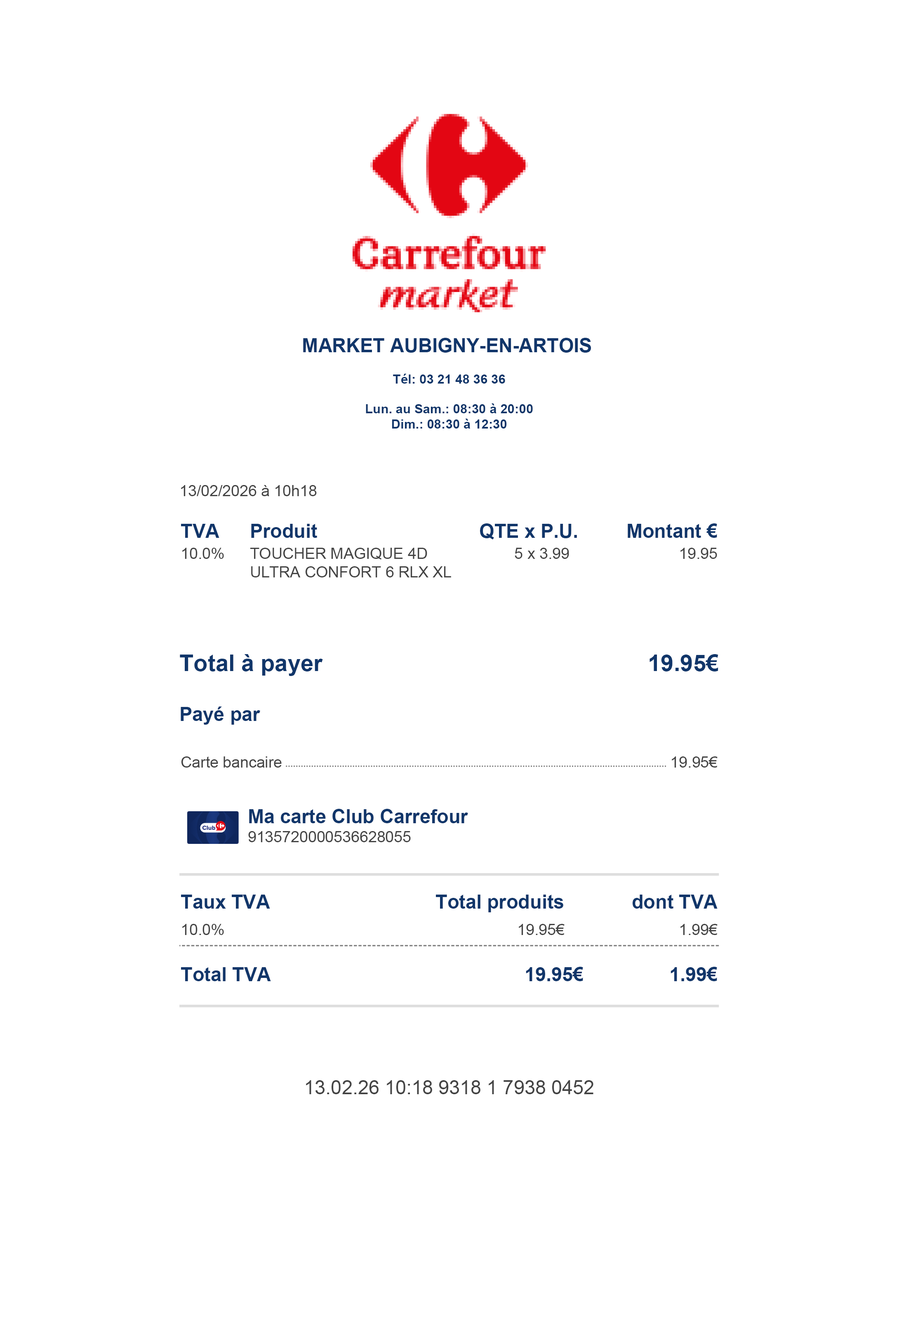
<style>
.page{position:relative;width:899px;height:1326px;background:#ffffff}
.page>*{position:absolute;margin:0}
.t1{font:19.3px "Arial-BoldMT";color:#11366a}
.t2{font:12.9px "Arial-BoldMT";color:#11366a}
.t3{font:15.5px "ArialMT";color:#444444}
.t4{font:23.2px "Arial-BoldMT";color:#11366a}
.t5{font:19.3px "ArialMT";color:#444444}
</style>
<div class="page">
<p class="t1" style="left:303px;top:338px;width:288px;height:15px">MARKET AUBIGNY-EN-ARTOIS</p>
<p class="t2" style="left:393px;top:374px;width:22px;height:10px">Tél:</p>
<p class="t2" style="left:420px;top:375px;width:85px;height:9px">03 21 48 36 36</p>
<p class="t2" style="left:366px;top:403px;width:167px;height:10px">Lun. au Sam.: 08:30 à 20:00</p>
<p class="t2" style="left:392px;top:419px;width:115px;height:10px">Dim.: 08:30 à 12:30</p>
<p class="t3" style="left:181px;top:485px;width:136px;height:11px">13/02/2026 à 10h18</p>
<p class="t1" style="left:181px;top:524px;width:38px;height:14px">TVA</p>
<p class="t1" style="left:251px;top:524px;width:66px;height:14px">Produit</p>
<p class="t1" style="left:480px;top:523px;width:97px;height:17px">QTE x P.U.</p>
<p class="t1" style="left:628px;top:523px;width:89px;height:15px">Montant €</p>
<p class="t3" style="left:182px;top:548px;width:42px;height:11px">10.0%</p>
<p class="t3" style="left:250px;top:548px;width:201px;height:29px">TOUCHER MAGIQUE 4D<br>ULTRA CONFORT 6 RLX XL</p>
<p class="t3" style="left:515px;top:548px;width:54px;height:11px">5 x 3.99</p>
<p class="t3" style="left:681px;top:548px;width:36px;height:11px">19.95</p>
<p class="t4" style="left:180px;top:654px;width:143px;height:22px">Total à payer</p>
<p class="t4" style="left:650px;top:654px;width:69px;height:18px">19.95€</p>
<p class="t1" style="left:181px;top:707px;width:79px;height:18px">Payé par</p>
<p class="t3" style="left:181px;top:756px;width:101px;height:12px">Carte bancaire</p>
<p class="t3" style="left:672px;top:756px;width:46px;height:12px">19.95€</p>
<p class="t1" style="left:249px;top:809px;width:219px;height:14px">Ma carte Club Carrefour</p>
<p class="t3" style="left:248px;top:831px;width:163px;height:11px">9135720000536628055</p>
<p class="t1" style="left:181px;top:895px;width:89px;height:14px">Taux TVA</p>
<p class="t1" style="left:436px;top:895px;width:127px;height:17px">Total produits</p>
<p class="t1" style="left:633px;top:895px;width:85px;height:14px">dont TVA</p>
<p class="t3" style="left:182px;top:924px;width:42px;height:11px">10.0%</p>
<p class="t3" style="left:519px;top:924px;width:46px;height:11px">19.95€</p>
<p class="t3" style="left:681px;top:924px;width:37px;height:11px">1.99€</p>
<p class="t1" style="left:181px;top:967px;width:90px;height:14px">Total TVA</p>
<p class="t1" style="left:526px;top:967px;width:57px;height:14px">19.95€</p>
<p class="t1" style="left:671px;top:967px;width:46px;height:14px">1.99€</p>
<p class="t5" style="left:306px;top:1080px;width:288px;height:14px">13.02.26 10:18 9318 1 7938 0452</p>
</div>
